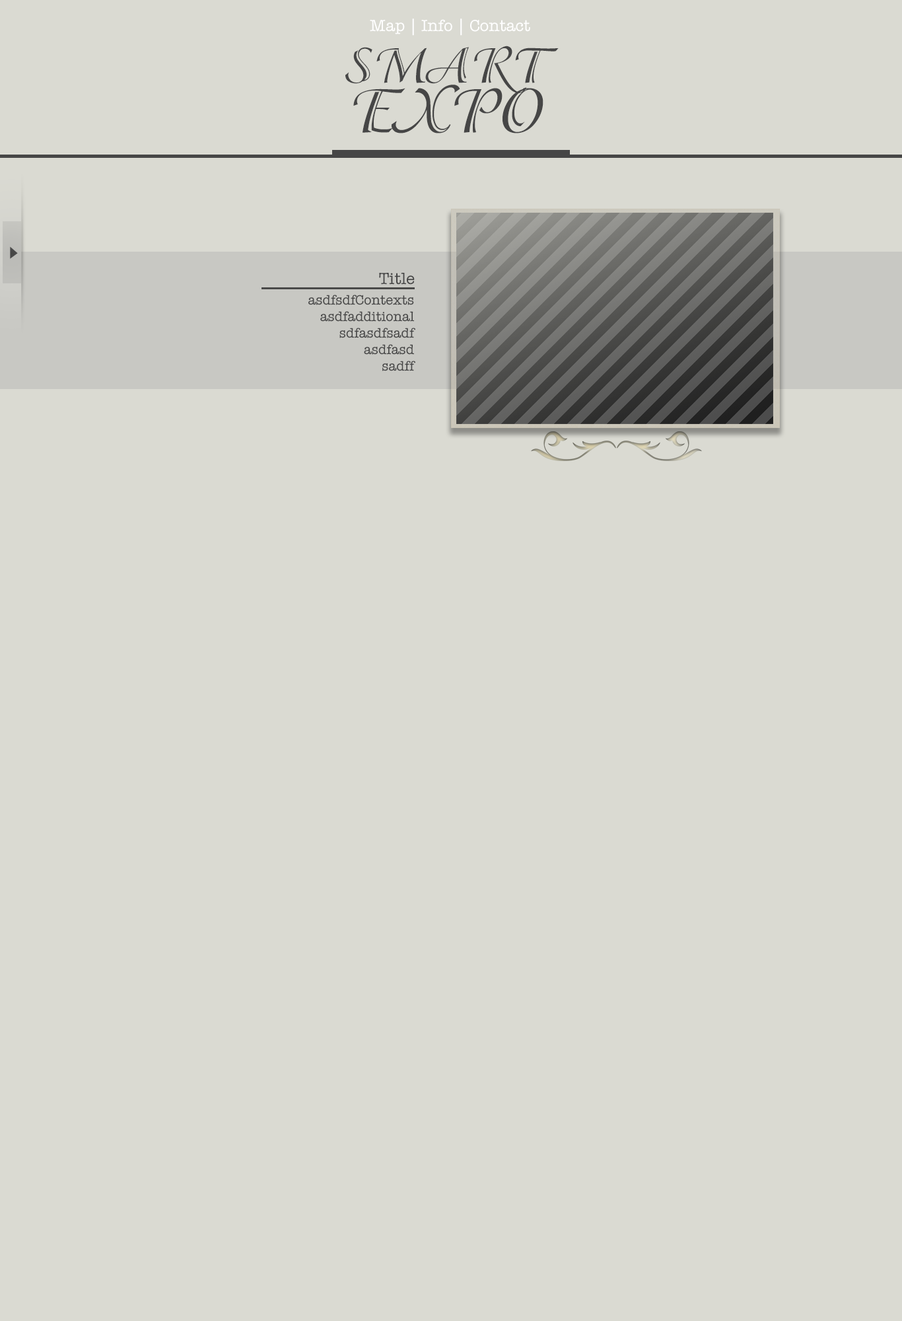
<style>
.page{position:relative;width:902px;height:1321px;background:#dadad2}
.page>*{position:absolute;margin:0}
.t1{font:16.5px "AmericanTypewriter";color:#ffffff}
.t2{font:55.1px/49.5px "Adorable-";color:#464646}
.t3{font:68.8px/49.5px "Adorable-";color:#464646}
.t4{font:7.9px "AmericanTypewriter";color:#464646}
.t5{font:13.8px "AmericanTypewriter";color:#464646}
</style>
<div class="page">
<p class="t1" style="left:370px;top:18px;width:161px;height:18px">Map | Info | Contact</p>
<p class="t2" style="left:346px;top:46px;width:213px;height:87px;text-align:center">SMART<br><span class="t3">EXPO</span></p>
<p class="t4" style="left:379px;top:273px;width:36px;height:12px">Title</p>
<p class="t5" style="left:309px;top:295px;width:107px;height:76px;text-align:right">asdfsdfContexts<br>asdfadditional<br>sdfasdfsadf<br>asdfasd<br>sadff</p>
</div>
